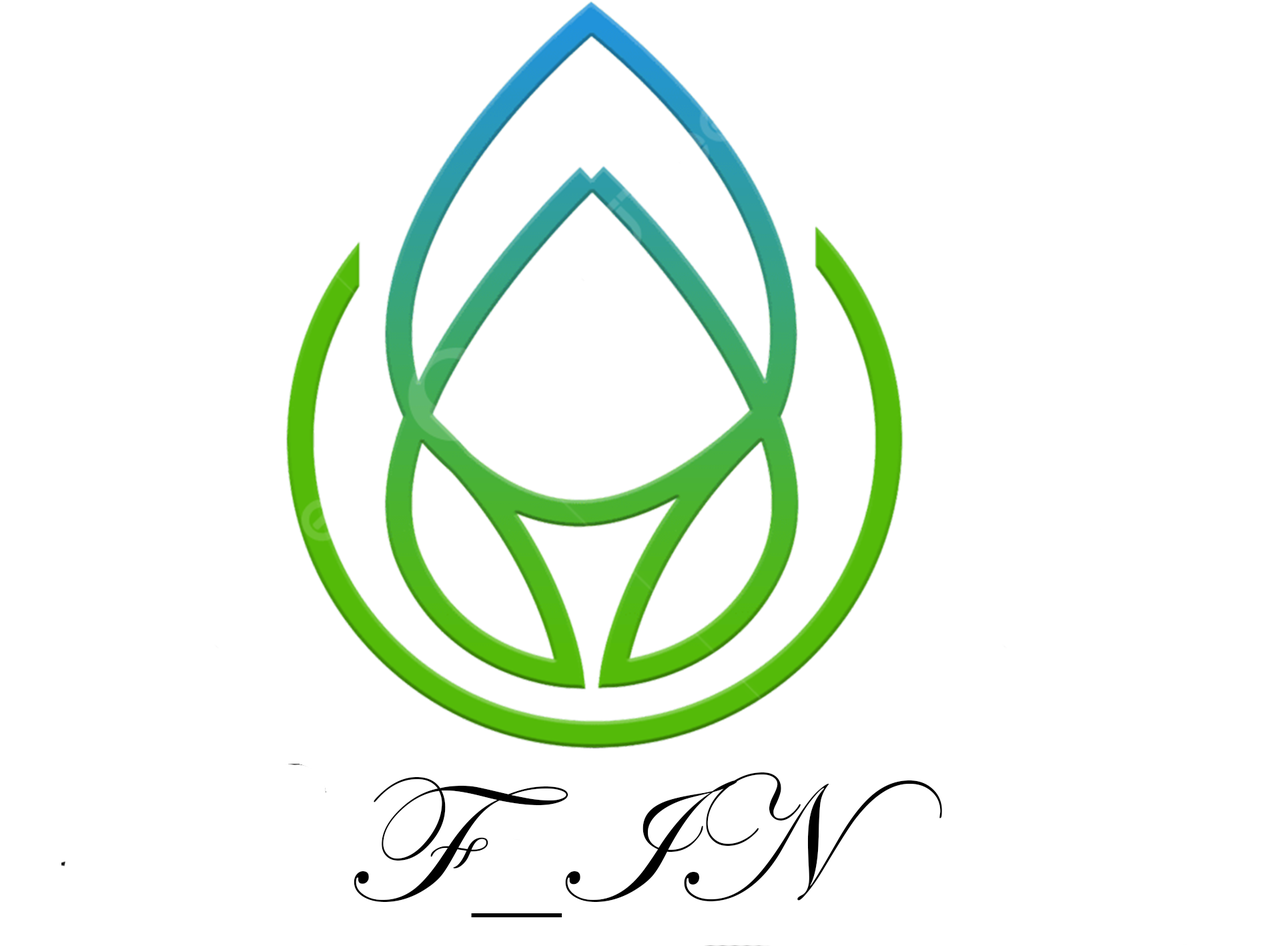
<style>
.page{position:relative;width:1261px;height:946px;background:#ffffff}
.page>*{position:absolute;margin:0}
.t1{font:180.7px "EdwardianScriptITC";color:#000000}
</style>
<div class="page">
<p class="t1" style="left:354px;top:772px;width:588px;height:145px">F_IN</p>
</div>
